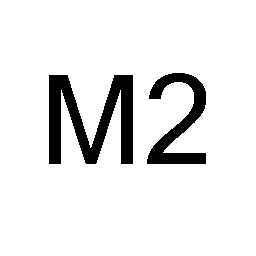
<style>
.page{position:relative;width:256px;height:256px;background:#ffffff}
.page>*{position:absolute;margin:0}
.t1{font:125px "MicrosoftSansSerif";color:#000000}
.t2{font:125px "CopperplateGothic-Bold";color:#e40000}
</style>
<div class="page">
<p class="t1" style="left:49px;top:73px;width:157px;height:91px"><span class="t2"> </span>M2</p>
</div>
